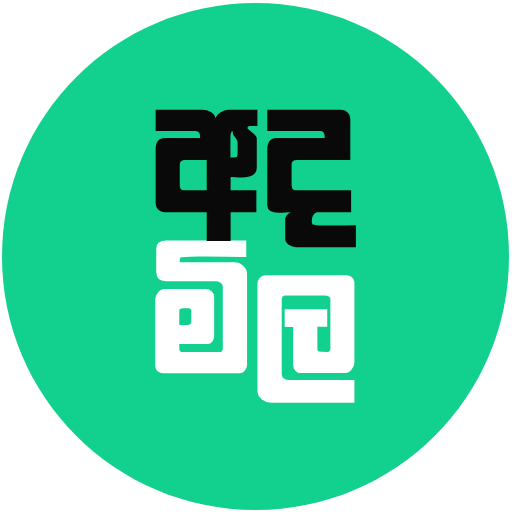
<style>
.page{position:relative;width:512px;height:512px;background:#12d18e}
.page>*{position:absolute;margin:0}
.t1{font:206px "SuPalitha";color:#090909}
.t2{font:197px "SuPalitha";color:#ffffff}
</style>
<div class="page">
<p class="t1" style="left:155px;top:109px;width:202px;height:139px">wo</p>
<p class="t2" style="left:155px;top:240px;width:200px;height:163px">ñ​,</p>
</div>
